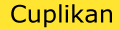
<style>
.page{position:relative;width:120px;height:30px;background:#ffe532}
.page>*{position:absolute;margin:0}
.t1{font:24px "Verdana";color:#000000}
</style>
<div class="page">
<p class="t1" style="left:11px;top:4px;width:101px;height:24px">Cuplikan</p>
</div>
